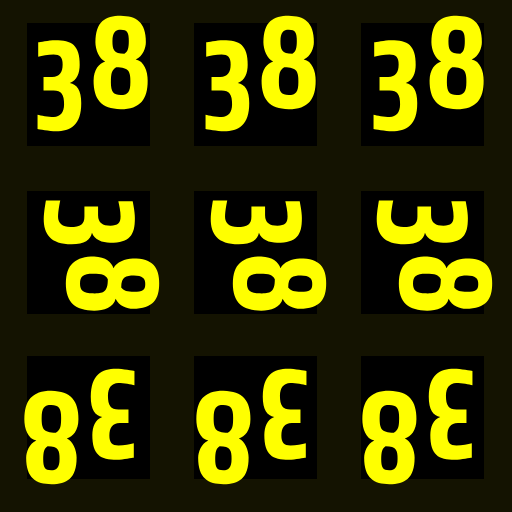
<style>
.page{position:relative;width:512px;height:512px;background:#141301}
.page>*{position:absolute;margin:0}
.t1{font:130px "Share-BoldOSF";color:#ffff00}
</style>
<div class="page">
<p class="t1" style="left:37px;top:15px;width:111px;height:117px">38</p>
<p class="t1" style="left:205px;top:15px;width:111px;height:117px">38</p>
<p class="t1" style="left:373px;top:15px;width:111px;height:117px">38</p>
<p class="t1" style="left:43px;top:200px;width:117px;height:111px;rotate:90deg">38</p>
<p class="t1" style="left:210px;top:200px;width:117px;height:111px;rotate:90deg">38</p>
<p class="t1" style="left:376px;top:200px;width:117px;height:111px;rotate:90deg">38</p>
<p class="t1" style="left:24px;top:368px;width:111px;height:117px;rotate:-180deg">38</p>
<p class="t1" style="left:196px;top:368px;width:111px;height:117px;rotate:-180deg">38</p>
<p class="t1" style="left:362px;top:368px;width:111px;height:117px;rotate:-180deg">38</p>
</div>
